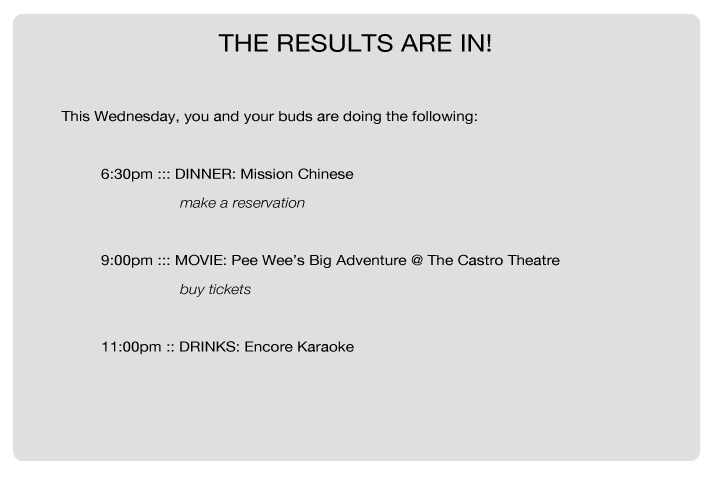
<style>
.page{position:relative;width:720px;height:480px;background:#dfdfdf}
.page>*{position:absolute;margin:0}
.t1{font:14px "HelveticaNeue";color:#000000;scale:1.1 1}
.t2{font:24px "HelveticaNeue";color:#000000;scale:1.1 1}
.t3{font:14px "HelveticaNeue-LightItalic";color:#000000;scale:1.1 1}
</style>
<div class="page">
<p class="t1" style="left:61px;top:34px;width:499px;height:321px;text-align:center"><span class="t2">THE RESULTS ARE IN!<br><br></span> This Wednesday, you and your buds are doing the following:<br><br>  6:30pm ::: DINNER: Mission Chinese<br>    <span class="t3">make a reservation<br><br></span>  9:00pm ::: MOVIE: Pee Wee’s Big Adventure @ The Castro Theatre<br>    <span class="t3">buy tickets<br><br></span>  11:00pm :: DRINKS: Encore Karaoke</p>
</div>
